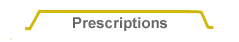
<style>
.page{position:relative;width:239px;height:42px;background:#ffffff}
.page>*{position:absolute;margin:0}
.t1{font:15px "Arial-BoldMT";color:#666666}
</style>
<div class="page">
<p class="t1" style="left:73px;top:17px;width:94px;height:14px">Prescriptions</p>
</div>
